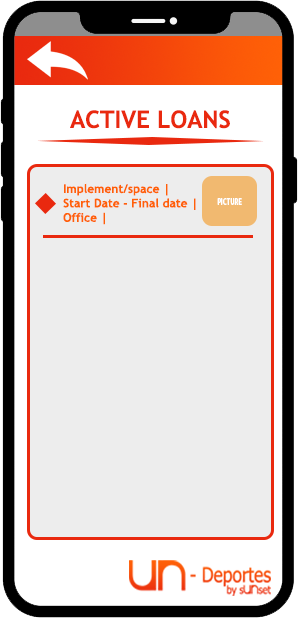
<style>
.page{position:relative;width:298px;height:618px;background:#ededed}
.page>*{position:absolute;margin:0}
.t1{font:24px "TrebuchetMS-Bold";color:#e9290f}
.t2{font:12px "TrebuchetMS-Bold";color:#ff6107}
.t3{font:9px "MyriadPro-Bold";color:#ffffff;scale:0.7 1}
</style>
<div class="page">
<p class="t1" style="left:70px;top:110px;width:160px;height:19px">ACTIVE LOANS</p>
<p class="t2" style="left:63px;top:183px;width:133px;height:42px">Implement/space | <br>Start Date - Final date |<br>Office |</p>
<p class="t3" style="left:217px;top:198px;width:25px;height:7px">PICTURE</p>
</div>
